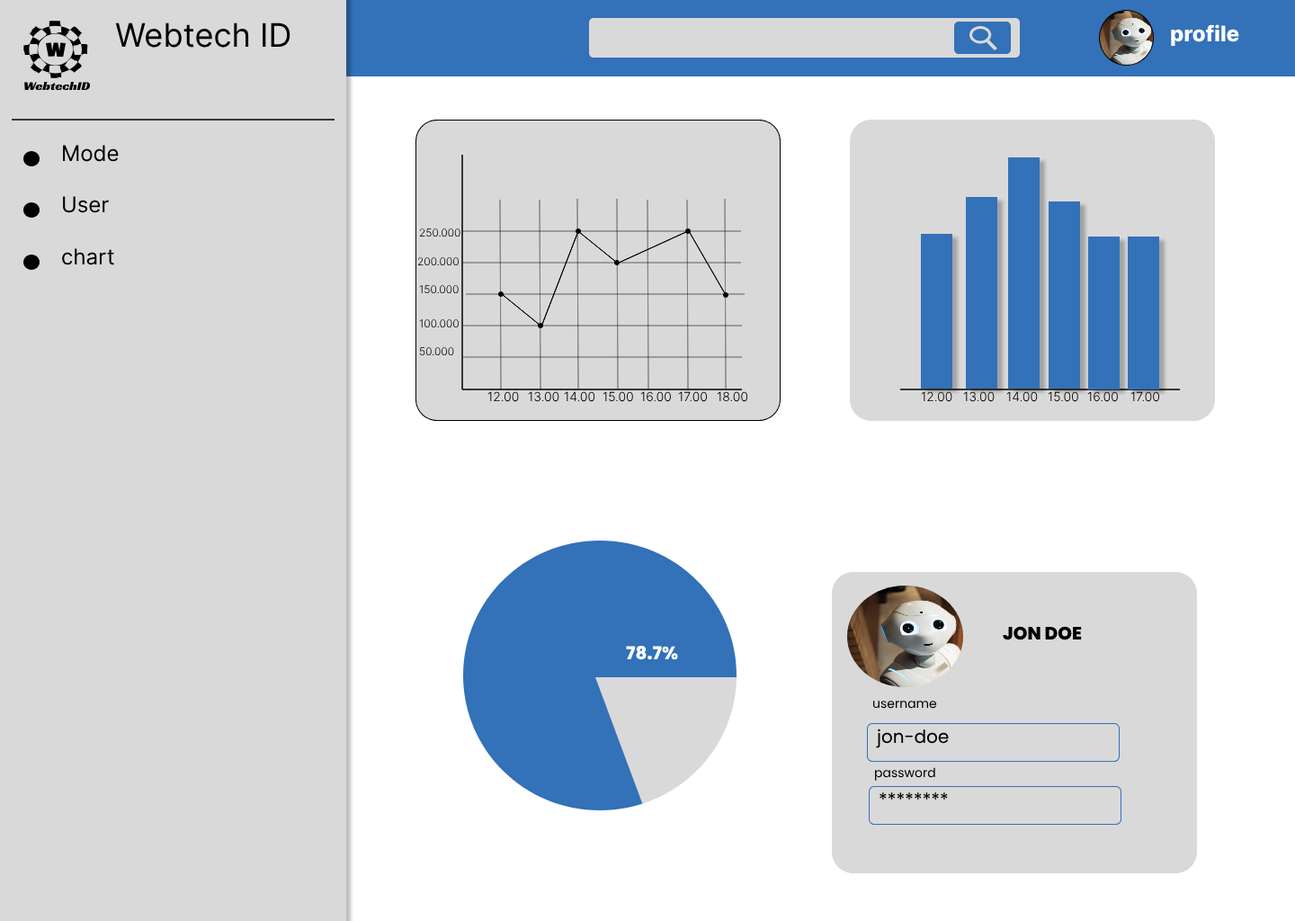
<style>
.page{position:relative;width:1295px;height:921px;background:#d9d9d9}
.page>*{position:absolute;margin:0}
.t1{font:32.4px "Inter-Regular";color:#000000}
.t2{font:21.6px "Inter-ExtraBold";color:#ffffff}
.t3{font:21.6px "Inter-Regular";color:#000000}
.t4{font:10.8px "Inter-Light"}
.t5{font:12.6px "Inter-Light";color:#000000}
.t6{font:18px "Poppins-ExtraBold";color:#000000}
.t7{font:18px "Poppins-ExtraBold";color:#ffffff}
.t8{font:12.6px "Poppins-Regular";color:#000000}
.t9{font:18px "Poppins-Regular";color:#000000}
</style>
<div class="page">
<p class="t1" style="left:115px;top:22px;width:175px;height:26px">Webtech ID</p>
<p class="t2" style="left:1171px;top:24px;width:68px;height:22px">profile</p>
<p class="t3" style="left:63px;top:145px;width:56px;height:17px">Mode</p>
<p class="t3" style="left:63px;top:196px;width:46px;height:17px">User</p>
<p class="t4" style="left:419px;top:228px;width:41px;height:9px">250.000</p>
<p class="t3" style="left:62px;top:248px;width:52px;height:17px">chart</p>
<p class="t4" style="left:417px;top:257px;width:42px;height:9px">200.000</p>
<p class="t4" style="left:419px;top:285px;width:40px;height:9px">150.000</p>
<p class="t4" style="left:419px;top:319px;width:40px;height:9px">100.000</p>
<p class="t4" style="left:419px;top:347px;width:35px;height:9px">50.000</p>
<p class="t5" style="left:487px;top:391px;width:32px;height:11px">12.00</p>
<p class="t5" style="left:528px;top:391px;width:31px;height:11px">13.00</p>
<p class="t5" style="left:564px;top:391px;width:31px;height:11px">14.00</p>
<p class="t5" style="left:603px;top:391px;width:30px;height:11px">15.00</p>
<p class="t5" style="left:640px;top:391px;width:31px;height:11px">16.00</p>
<p class="t5" style="left:678px;top:391px;width:29px;height:11px">17.00</p>
<p class="t5" style="left:717px;top:391px;width:31px;height:11px">18.00</p>
<p class="t5" style="left:921px;top:391px;width:31px;height:11px">12.00</p>
<p class="t5" style="left:963px;top:391px;width:32px;height:11px">13.00</p>
<p class="t5" style="left:1006px;top:391px;width:32px;height:11px">14.00</p>
<p class="t5" style="left:1048px;top:391px;width:30px;height:11px">15.00</p>
<p class="t5" style="left:1087px;top:391px;width:31px;height:11px">16.00</p>
<p class="t5" style="left:1130px;top:391px;width:29px;height:11px">17.00</p>
<p class="t6" style="left:1003px;top:626px;width:79px;height:14px">JON DOE</p>
<p class="t7" style="left:626px;top:646px;width:52px;height:14px">78.7%</p>
<p class="t8" style="left:873px;top:701px;width:64px;height:8px">username</p>
<p class="t9" style="left:876px;top:728px;width:73px;height:20px">jon-doe</p>
<p class="t8" style="left:875px;top:767px;width:60px;height:14px">password</p>
<p class="t9" style="left:879px;top:792px;width:69px;height:7px">********</p>
</div>
